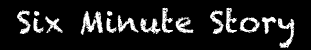
<style>
.page{position:relative;width:311px;height:50px;background:#000000}
.page>*{position:absolute;margin:0}
.t1{font:30px "Chalkduster";letter-spacing:0.015em;color:#ffffff}
</style>
<div class="page">
<p class="t1" style="left:17px;top:7px;width:278px;height:41px">Six Minute Story</p>
</div>
